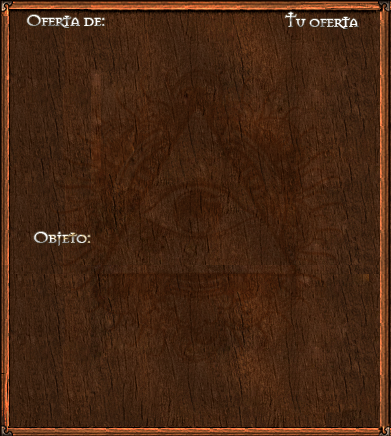
<style>
.page{position:relative;width:391px;height:436px}
.page>*{position:absolute;margin:0}
.t1{font:18px "Mason-Regular";letter-spacing:-0.06em}
</style>
<div class="page">
<p class="t1" style="left:27px;top:15px;width:78px;height:13px">Oferta de:</p>
<p class="t1" style="left:285px;top:12px;width:74px;height:17px">Tu oferta</p>
<p class="t1" style="left:34px;top:232px;width:57px;height:14px">Objeto:</p>
</div>
